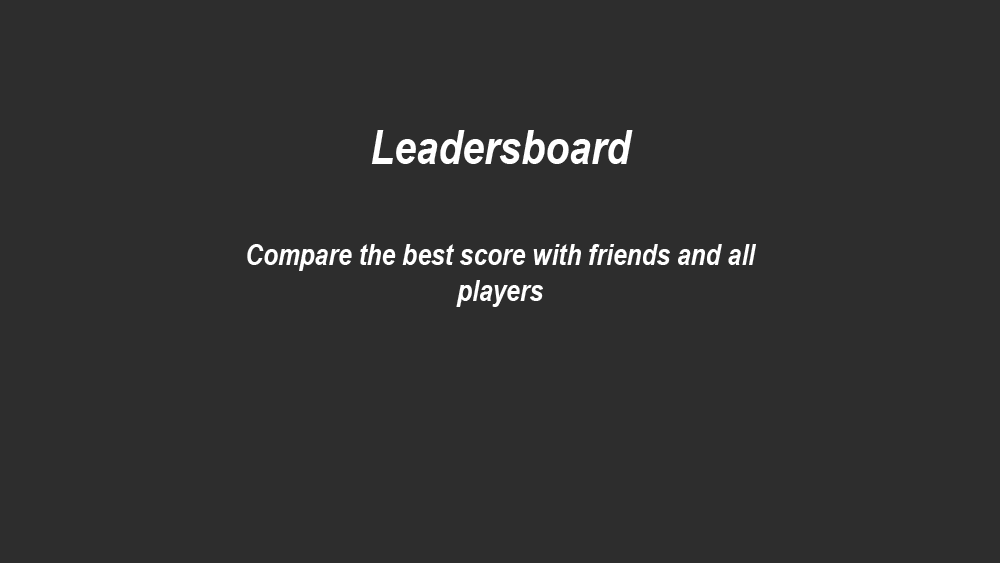
<style>
.page{position:relative;width:1000px;height:563px;background:#2d2d2d}
.page>*{position:absolute;margin:0}
.t1{font:48px "ArialNarrow-BoldItalic";color:#ffffff}
.t2{font:30px "ArialNarrow-BoldItalic";color:#ffffff}
</style>
<div class="page">
<p class="t1" style="left:371px;top:130px;width:262px;height:34px">Leadersboard</p>
<p class="t2" style="left:247px;top:244px;width:509px;height:63px;text-align:center">Compare the best score with friends and all players</p>
</div>
